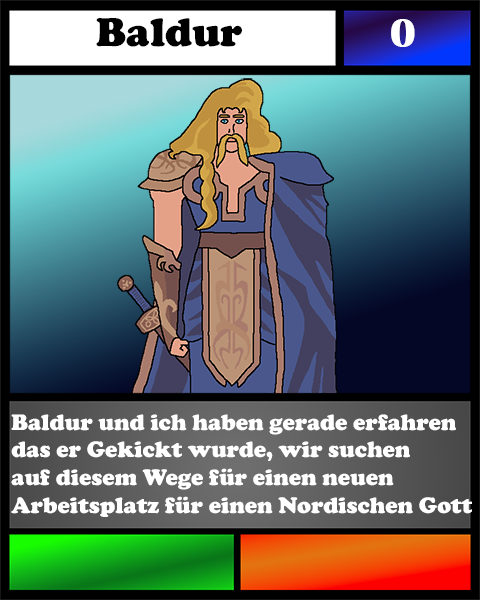
<style>
.page{position:relative;width:480px;height:600px}
.page>*{position:absolute;margin:0}
.t1{font:41.7px "CooperBlack";color:#000000}
.t2{font:41.7px "BritannicBold";color:#ffffff}
.t3{font:23.1px "CooperBlack";color:#ffffff}
</style>
<div class="page">
<p class="t1" style="left:96px;top:18px;width:146px;height:29px">Baldur</p>
<p class="t2" style="left:391px;top:19px;width:24px;height:28px">0</p>
<p class="t3" style="left:11px;top:414px;width:461px;height:103px">Baldur und ich haben gerade erfahren<br>das er Gekickt wurde, wir suchen<br>auf diesem Wege für einen neuen<br>Arbeitsplatz für einen Nordischen Gott</p>
</div>
